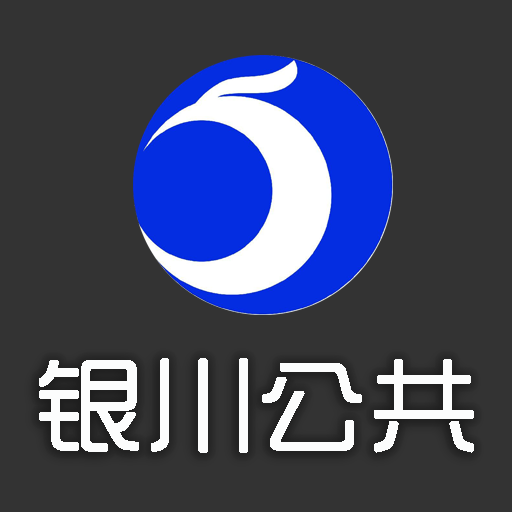
<style>
.page{position:relative;width:512px;height:512px;background:#333333}
.page>*{position:absolute;margin:0}
.t1{font:106.7px "SJshishang-Regular";letter-spacing:0.02em;color:#fcfdfd;font-weight:bold}
</style>
<div class="page">
<p class="t1" style="left:39px;top:358px;width:435px;height:95px">银川公共</p>
</div>
